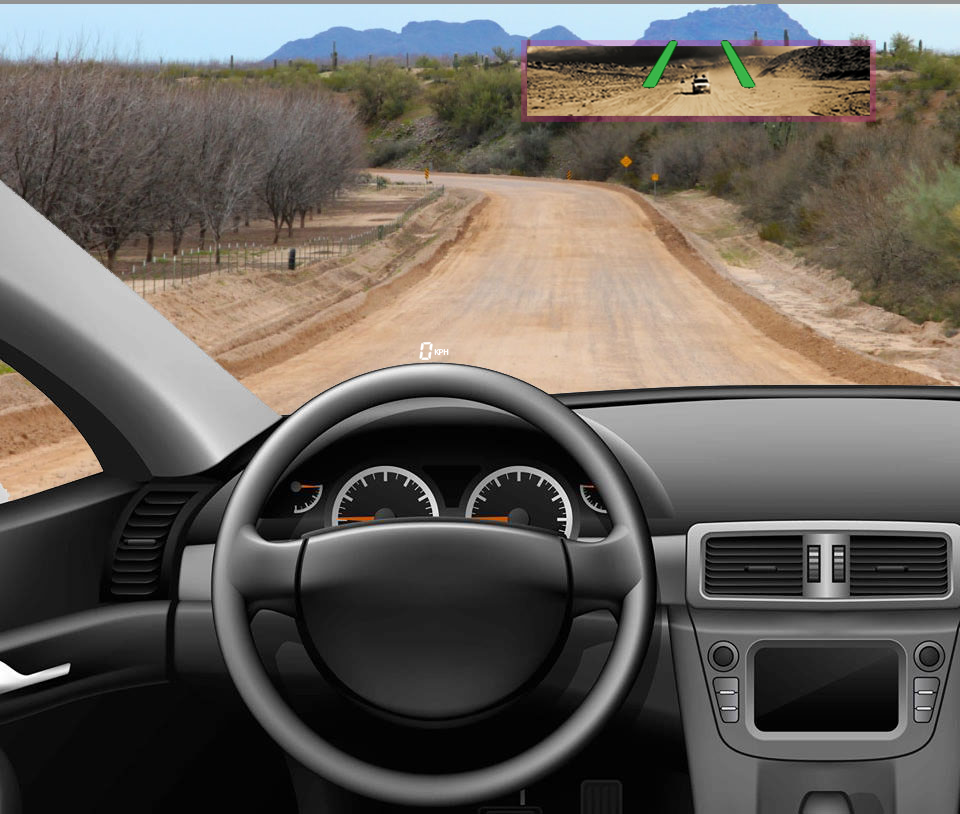
<style>
.page{position:relative;width:960px;height:814px}
.page>*{position:absolute;margin:0}
.t1{font:8.6px "MyriadPro-Regular";color:#ffffff}
.t2{font:22.1px "AbadiMT-CondensedLight";color:#ffffff}
</style>
<div class="page">
<p class="t1" style="left:434px;top:349px;width:15px;height:6px"><span class="t2"><br></span>KPH</p>
</div>
